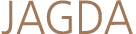
<style>
.page{position:relative;width:136px;height:34px;background:#ffffff}
.page>*{position:absolute;margin:0}
.t1{font:48px "Humanist777BT-LightB";color:#9f795a;scale:0.92 1}
</style>
<div class="page">
<p class="t1" style="left:1px;top:0px;width:132px;height:35px">JAGDA</p>
</div>
